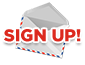
<style>
.page{position:relative;width:85px;height:65px;background:#ffffff}
.page>*{position:absolute;margin:0}
.t1{font:17px "GothamBlack";color:#dc291e;text-transform:uppercase}
</style>
<div class="page">
<p class="t1" style="left:4px;top:29px;width:77px;height:13px">Sign Up!</p>
</div>
